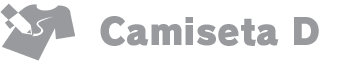
<style>
.page{position:relative;width:352px;height:64px;background:#ffffff}
.page>*{position:absolute;margin:0}
.t1{font:36px "RodinPro-UB";color:#989a9d}
</style>
<div class="page">
<p class="t1" style="left:100px;top:16px;width:219px;height:30px">Camiseta D</p>
</div>
